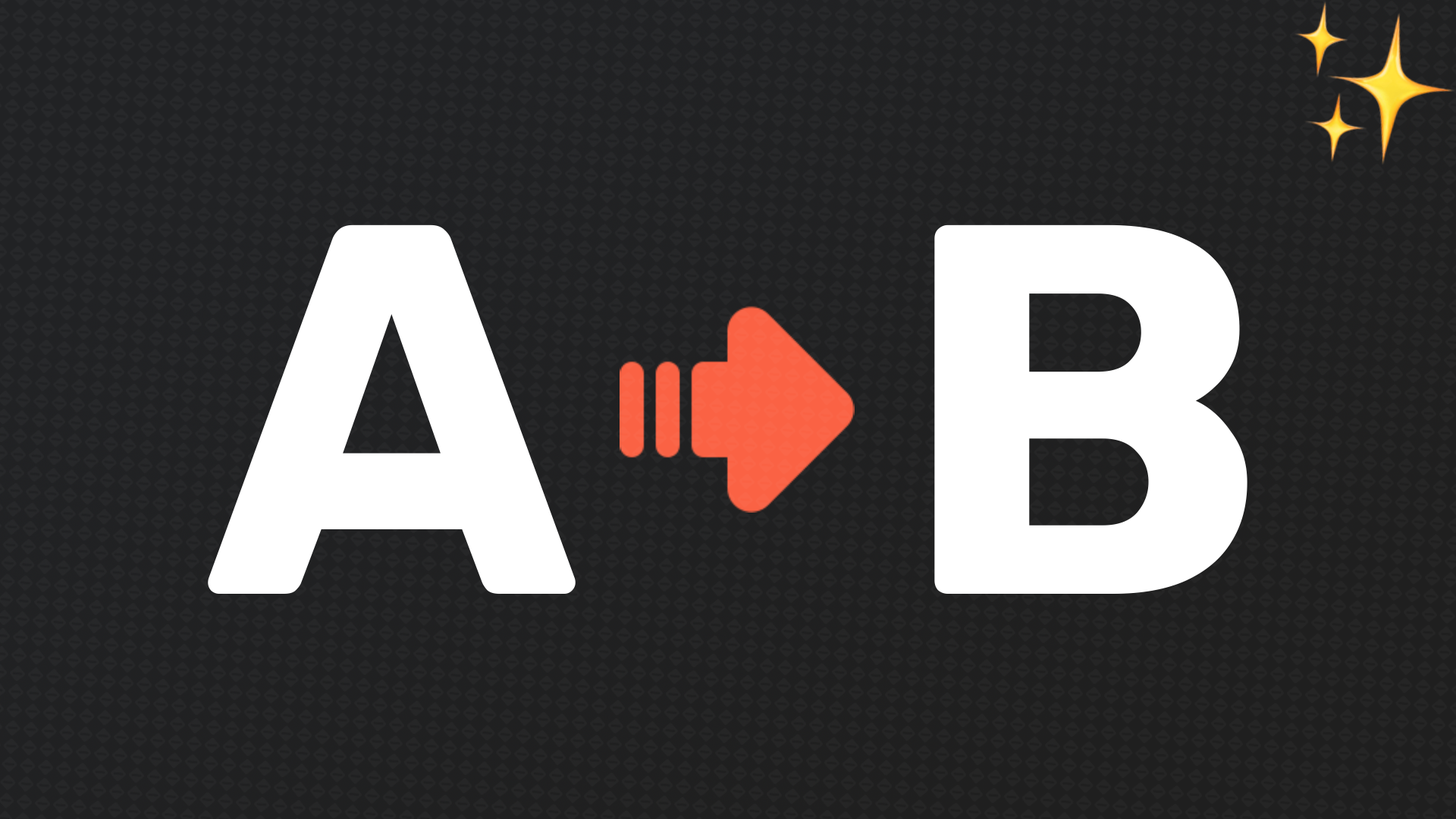
<style>
.page{position:relative;width:1456px;height:819px}
.page>*{position:absolute;margin:0}
.t1{font:526.7px "Rubik-Bold";color:#ffffff}
</style>
<div class="page">
<p class="t1" style="left:208px;top:224px;width:368px;height:370px">A</p>
<p class="t1" style="left:934px;top:224px;width:313px;height:371px">B</p>
</div>
